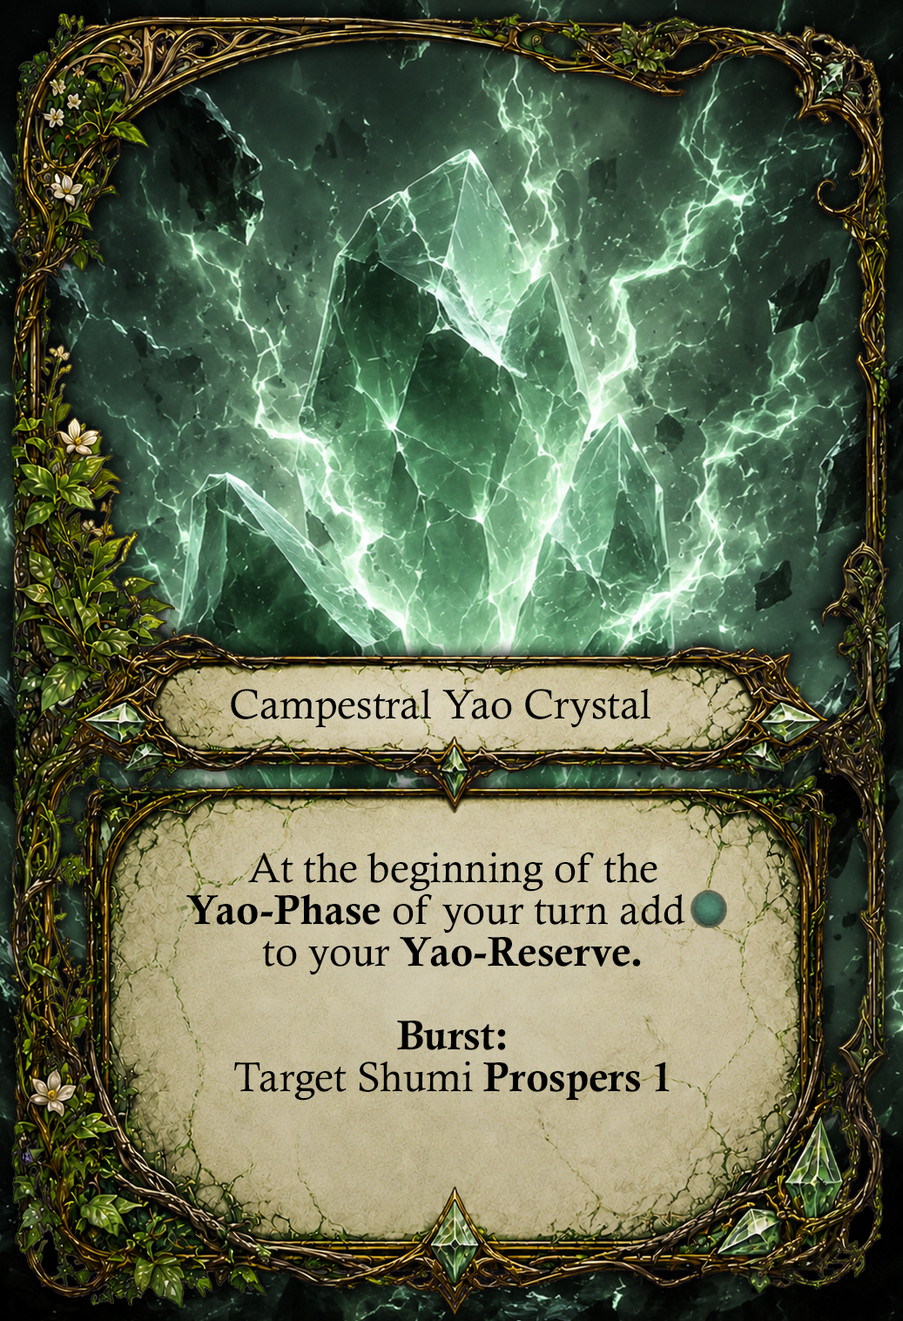
<style>
.page{position:relative;width:903px;height:1321px}
.page>*{position:absolute;margin:0}
.t1{font:41.8px "CalistoMT";color:#000000}
.t2{font:41.8px/41.8px "CalistoMT";color:#000000}
.t3{font:41.8px/41.8px "CalisMTBol";color:#000000}
</style>
<div class="page">
<p class="t1" style="left:231px;top:688px;width:419px;height:40px">Campestral Yao Crystal</p>
<p class="t2" style="left:186px;top:851px;width:533px;height:249px;text-align:center">At the beginning of the <span class="t3">Yao-Phase </span>of your turn add --   <br>to your <span class="t3">Yao-Reserve.<br><br>Burst: <br></span>Target Shumi <span class="t3">Prospers 1</span></p>
</div>
